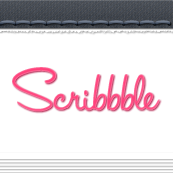
<style>
.page{position:relative;width:173px;height:173px;background:#ffffff}
.page>*{position:absolute;margin:0}
.t1{font:72.4px "RefreshmentStand";letter-spacing:-0.025em;color:#ff407a;font-weight:bold;scale:0.91 1}
</style>
<div class="page">
<p class="t1" style="left:12px;top:67px;width:148px;height:45px">Scribbble</p>
</div>
